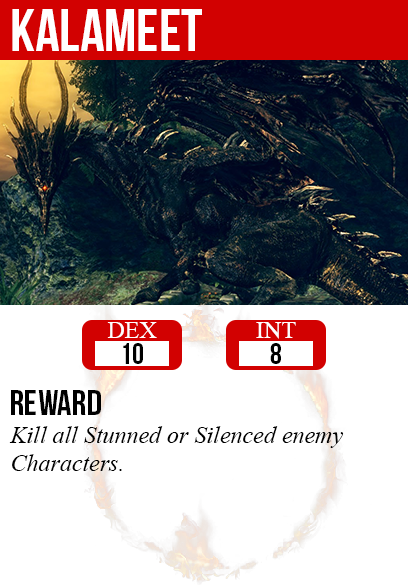
<style>
.page{position:relative;width:408px;height:585px;background:#ffffff}
.page>*{position:absolute;margin:0}
.t1{font:60px "BebasNeue";color:#ffffff}
.t2{font:24px "TimesNewRomanPSMT";color:#ffffff}
.t3{font:30px "BebasNeue";color:#000000}
.t4{font:36px "BebasNeue";color:#000000}
.t5{font:24px "TimesNewRomanPS-ItalicMT";color:#000000}
</style>
<div class="page">
<p class="t1" style="left:12px;top:9px;width:190px;height:42px">kalameet</p>
<p class="t2" style="left:107px;top:322px;width:50px;height:16px">DEX</p>
<p class="t2" style="left:256px;top:322px;width:40px;height:17px">INT</p>
<p class="t3" style="left:123px;top:343px;width:20px;height:21px">10</p>
<p class="t3" style="left:270px;top:343px;width:11px;height:21px">8</p>
<p class="t4" style="left:11px;top:390px;width:90px;height:25px">reward</p>
<p class="t5" style="left:9px;top:426px;width:335px;height:45px">Kill all Stunned or Silenced enemy<br>Characters.</p>
</div>
